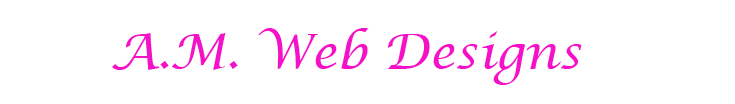
<style>
.page{position:relative;width:735px;height:104px;background:#ffffff}
.page>*{position:absolute;margin:0}
.t1{font:48px "LucidaCalligraphy-Italic";color:#f411c7}
</style>
<div class="page">
<p class="t1" style="left:112px;top:28px;width:470px;height:57px">A.M. Web Designs</p>
</div>
